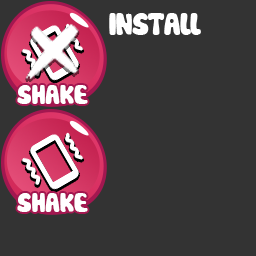
<style>
.page{position:relative;width:256px;height:256px;background:#333333}
.page>*{position:absolute;margin:0}
.t1{font:29.9px "Cookies";letter-spacing:-0.06em;color:#ffffff}
.t2{font:25.6px "Cookies";letter-spacing:-0.04em;color:#ffffff}
</style>
<div class="page">
<p class="t1" style="left:109px;top:13px;width:92px;height:22px">INSTAll</p>
<p class="t2" style="left:17px;top:85px;width:71px;height:19px">SHAKE</p>
<p class="t2" style="left:17px;top:193px;width:71px;height:19px">SHAKE</p>
</div>
